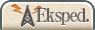
<style>
.page{position:relative;width:95px;height:30px}
.page>*{position:absolute;margin:0}
.t1{font:19px "RyuminPro-ExBold";letter-spacing:-0.08em;color:#6b6761;scale:0.9 1}
.t2{font:20px "RyuminPro-ExBold";letter-spacing:-0.08em;color:#6b6761;scale:0.9 1}
</style>
<div class="page">
<p class="t1" style="left:35px;top:8px;width:54px;height:17px">Eksped<span class="t2">.</span></p>
</div>
